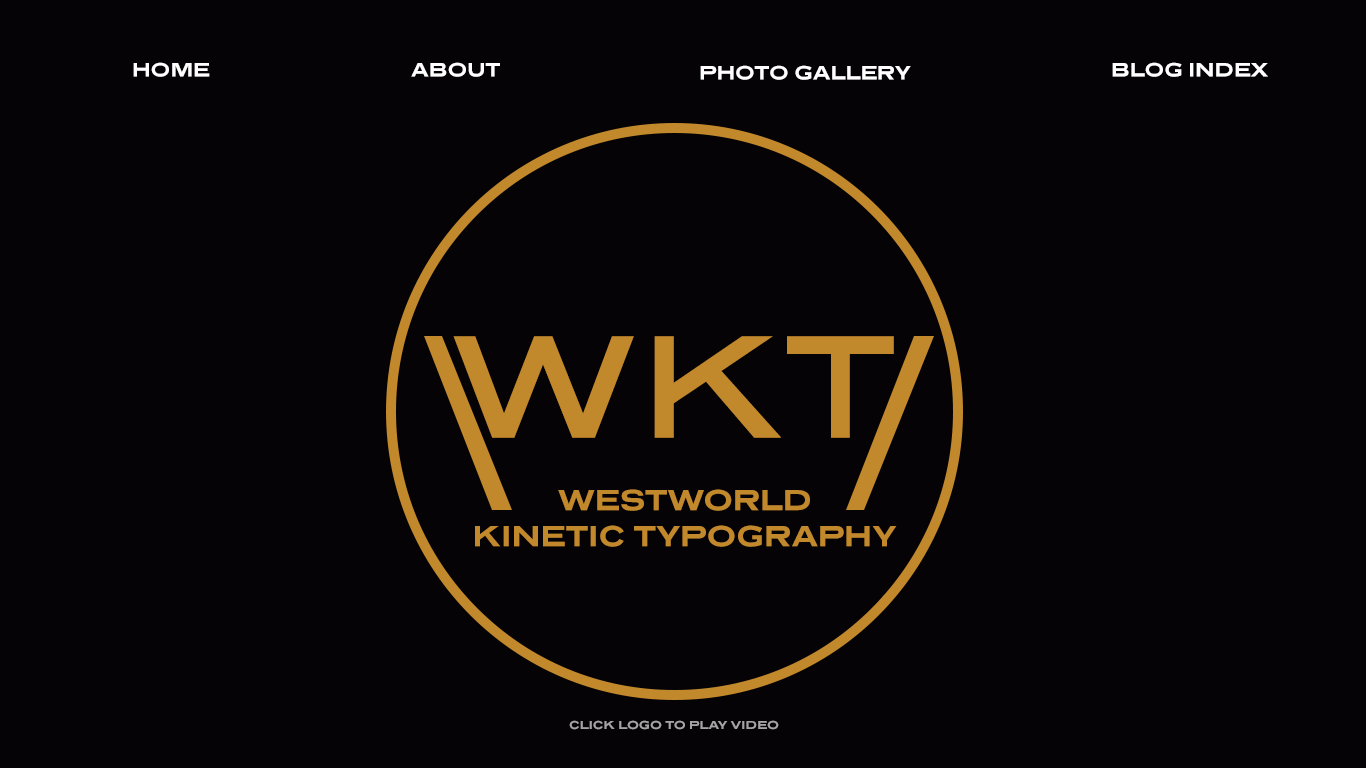
<style>
.page{position:relative;width:1366px;height:768px;background:#050306}
.page>*{position:absolute;margin:0}
.t1{font:20px "PresicavRg-Bold";color:#ffffff;text-transform:uppercase}
.t2{font:150px "PresicavRg-Regular";color:#c2882c;text-transform:uppercase}
.t3{font:30px "PresicavRg-Bold";color:#c2882c;text-transform:uppercase}
.t4{font:12px "PresicavRg-Bold";color:#a5a4a5;text-transform:uppercase}
</style>
<div class="page">
<p class="t1" style="left:133px;top:62px;width:77px;height:15px">Home</p>
<p class="t1" style="left:411px;top:62px;width:89px;height:15px">about</p>
<p class="t1" style="left:700px;top:65px;width:211px;height:15px">PHoto Gallery</p>
<p class="t1" style="left:1112px;top:62px;width:156px;height:15px">Blog Index</p>
<p class="t2" style="left:453px;top:336px;width:181px;height:102px">w</p>
<p class="t2" style="left:654px;top:336px;width:127px;height:102px">k</p>
<p class="t2" style="left:787px;top:336px;width:107px;height:102px">t</p>
<p class="t3" style="left:475px;top:489px;width:422px;height:58px;text-align:center">Westworld <br>Kinetic Typography</p>
<p class="t4" style="left:569px;top:720px;width:210px;height:10px">Click logo to play video</p>
</div>
